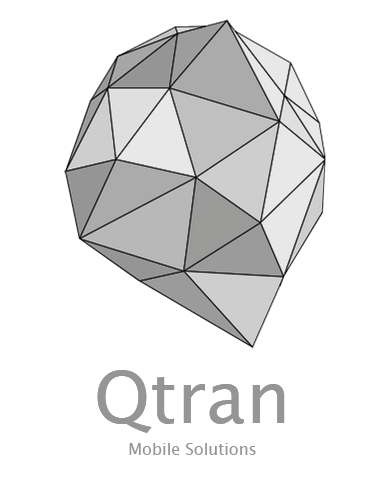
<style>
.page{position:relative;width:389px;height:489px;background:#ffffff}
.page>*{position:absolute;margin:0}
.t1{font:72px "LucidaSansUnicode";color:#959595}
.t2{font:16px "LucidaSansUnicode";color:#959595}
</style>
<div class="page">
<p class="t1" style="left:97px;top:370px;width:188px;height:63px">Qtran</p>
<p class="t1" style="left:97px;top:370px;width:188px;height:63px">Qtran</p>
<p class="t2" style="left:129px;top:443px;width:127px;height:12px">Mobile Solutions</p>
</div>
